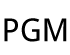
<style>
.page{position:relative;width:70px;height:55px;background:#ffffff}
.page>*{position:absolute;margin:0}
.t1{font:31.8px "DroidSans";color:#000000}
</style>
<div class="page">
<p class="t1" style="left:4px;top:18px;width:63px;height:24px">PGM</p>
</div>
